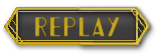
<style>
.page{position:relative;width:158px;height:54px}
.page>*{position:absolute;margin:0}
.t1{font:24px "ACMountain";color:#ba9814;font-weight:bold}
</style>
<div class="page">
<p class="t1" style="left:35px;top:17px;width:85px;height:20px">REPLAY</p>
</div>
